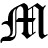
<style>
.page{position:relative;width:48px;height:48px;background:#ffffff}
.page>*{position:absolute;margin:0}
.t1{font:48px "OldEnglishTextMT";color:#000000}
</style>
<div class="page">
<p class="t1" style="left:0px;top:3px;width:48px;height:40px">M</p>
</div>
